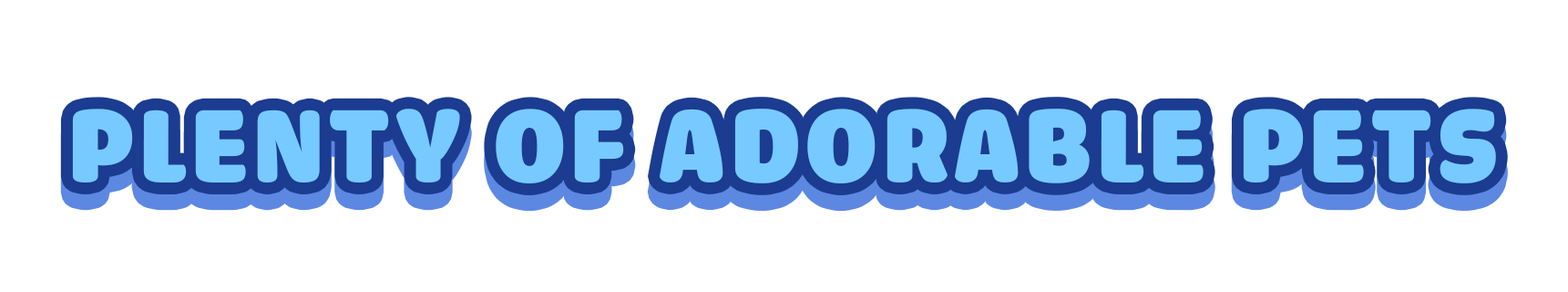
<style>
.page{position:relative;width:1568px;height:292px;background:#ffffff}
.page>*{position:absolute;margin:0}
.t1{font:109.3px "iCielCadena";letter-spacing:0.05em;color:#76caff;text-transform:uppercase}
</style>
<div class="page">
<p class="t1" style="left:72px;top:108px;width:1424px;height:75px">Plenty of adorable pets</p>
</div>
